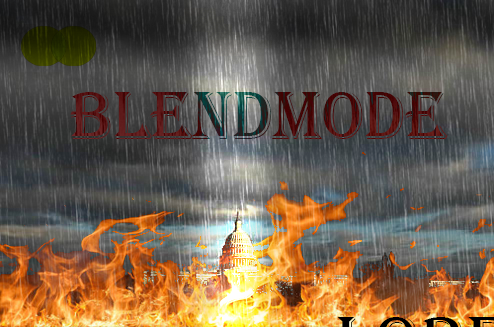
<style>
.page{position:relative;width:494px;height:327px}
.page>*{position:absolute;margin:0}
.t1{font:71.1px "Algerian";scale:0.95 1}
</style>
<div class="page">
<p class="t1" style="left:70px;top:92px;width:378px;height:47px">blendmode</p>
</div>
